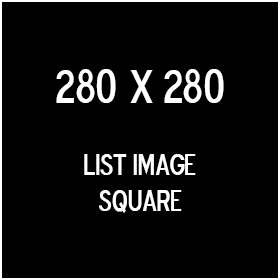
<style>
.page{position:relative;width:280px;height:280px;background:#000000}
.page>*{position:absolute;margin:0}
.t1{font:30px "BlueHighwayDType";color:#ffffff}
.t2{font:48px "BlueHighwayDType";color:#ffffff}
</style>
<div class="page">
<p class="t1" style="left:56px;top:69px;width:168px;height:144px;text-align:center"><span class="t2">280 x 280<br></span><br>LIST IMAGE<br>SQUARE</p>
</div>
